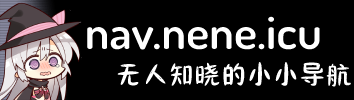
<style>
.page{position:relative;width:354px;height:100px;background:#000000}
.page>*{position:absolute;margin:0}
.t1{font:45.8px "Dosis-SemiBold";color:#ffffff;scale:1.06 1}
.t2{font:26.3px "huangyuchenheiyuan-Regular";color:#ffffff}
</style>
<div class="page">
<p class="t1" style="left:87px;top:16px;width:233px;height:34px">nav.nene.icu</p>
<p class="t2" style="left:117px;top:61px;width:234px;height:26px">无人知晓的小小导航</p>
</div>
